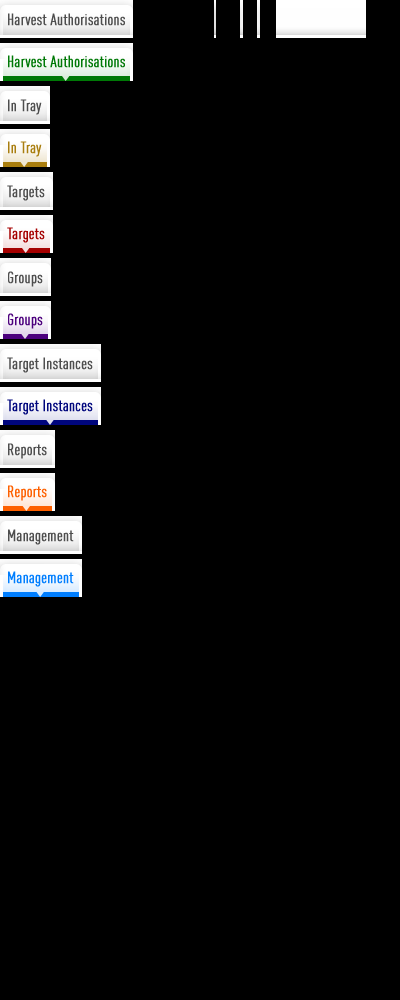
<style>
.page{position:relative;width:400px;height:1000px;background:#000000}
.page>*{position:absolute;margin:0}
.t1{font:16px "DINCond-Regular";color:#4e4e4e;font-weight:bold}
.t2{font:16px "DINCond-Regular";color:#007906;font-weight:bold}
.t3{font:16px "DINCond-Regular";color:#a97e0f;font-weight:bold}
.t4{font:16px "DINCond-Regular";color:#a50000;font-weight:bold}
.t5{font:16px "DINCond-Regular";color:#4c007d;font-weight:bold}
.t6{font:16px "DINCond-Regular";color:#00067d;font-weight:bold}
.t7{font:16px "DINCond-Regular";color:#fe6000;font-weight:bold}
.t8{font:16px "DINCond-Regular";color:#007efe;font-weight:bold}
</style>
<div class="page">
<p class="t1" style="left:8px;top:13px;width:117px;height:13px">Harvest Authorisations</p>
<p class="t2" style="left:8px;top:55px;width:117px;height:13px">Harvest Authorisations</p>
<p class="t1" style="left:8px;top:99px;width:34px;height:16px">In Tray</p>
<p class="t3" style="left:8px;top:141px;width:34px;height:16px">In Tray</p>
<p class="t1" style="left:7px;top:185px;width:38px;height:16px">Targets</p>
<p class="t4" style="left:7px;top:227px;width:38px;height:16px">Targets</p>
<p class="t1" style="left:8px;top:271px;width:35px;height:16px">Groups</p>
<p class="t5" style="left:8px;top:313px;width:35px;height:16px">Groups</p>
<p class="t1" style="left:7px;top:357px;width:86px;height:16px">Target Instances</p>
<p class="t6" style="left:7px;top:399px;width:86px;height:16px">Target Instances</p>
<p class="t1" style="left:8px;top:443px;width:39px;height:16px">Reports</p>
<p class="t7" style="left:8px;top:485px;width:39px;height:16px">Reports</p>
<p class="t1" style="left:8px;top:529px;width:66px;height:16px">Management</p>
<p class="t8" style="left:8px;top:571px;width:66px;height:16px">Management</p>
</div>
